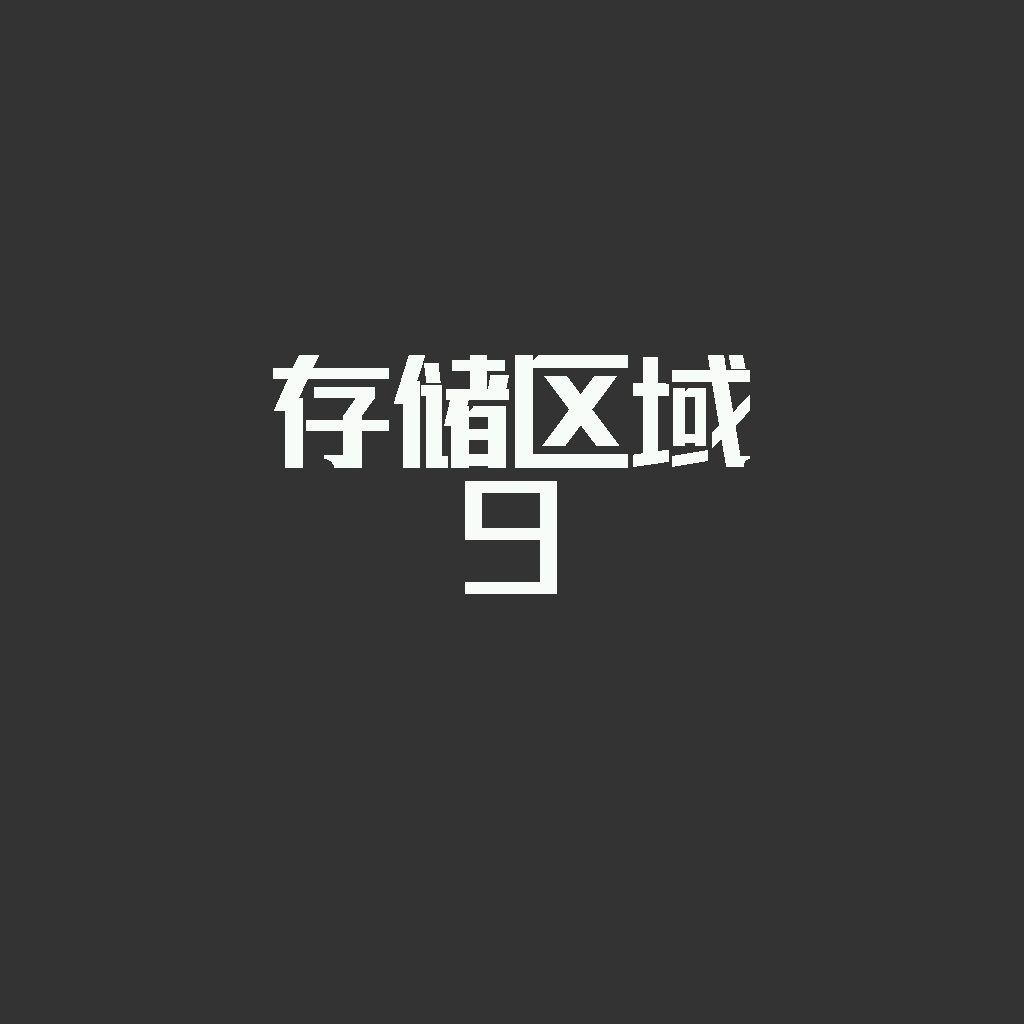
<style>
.page{position:relative;width:1024px;height:1024px;background:#333333}
.page>*{position:absolute;margin:0}
.t1{font:113px/126px "lianmengqiyilushuaizhengruiheiti-Regular";color:#f8fcf8}
</style>
<div class="page">
<p class="t1" style="left:273px;top:355px;width:477px;height:239px;text-align:center">存储区域<br>9</p>
</div>
